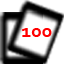
<style>
.page{position:relative;width:64px;height:64px;background:#ffffff}
.page>*{position:absolute;margin:0}
.t1{font:20.3px "Corbel-Bold";color:#ff0000}
</style>
<div class="page">
<p class="t1" style="left:22px;top:28px;width:30px;height:9px">100</p>
</div>
